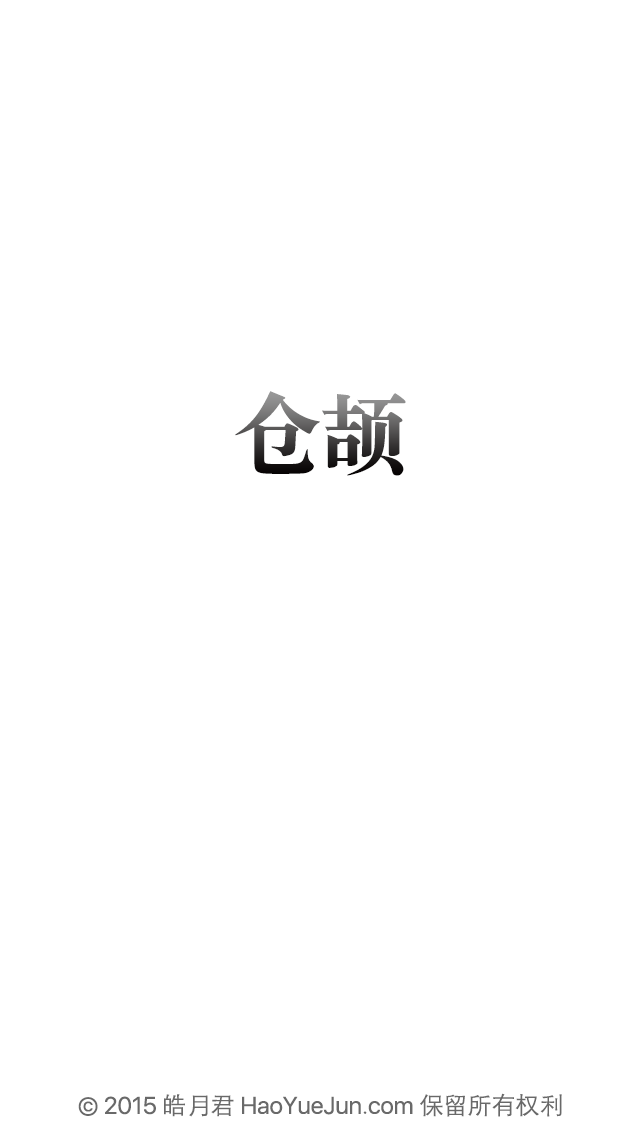
<style>
.page{position:relative;width:640px;height:1136px;background:#ffffff}
.page>*{position:absolute;margin:0}
.t1{font:88px "STSongti-SC-Black"}
.t2{font:24px "SFUIDisplay-Regular";color:#696969}
.t3{font:24px "STHeitiSC-Light";color:#696969}
</style>
<div class="page">
<p class="t1" style="left:235px;top:391px;width:171px;height:85px">仓颉</p>
<p class="t2" style="left:78px;top:1093px;width:484px;height:24px">© 2015 <span class="t3">皓月君 </span>HaoYueJun.com <span class="t3">保留所有权利</span></p>
</div>
